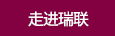
<style>
.page{position:relative;width:115px;height:36px;background:#830041}
.page>*{position:absolute;margin:0}
.t1{font:16px "SourceHanSansCN-Regular";letter-spacing:-0.06em;color:#ffffff;text-transform:uppercase}
</style>
<div class="page">
<p class="t1" style="left:28px;top:11px;width:61px;height:16px">走进瑞联</p>
</div>
